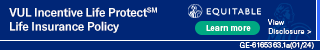
<style>
.page{position:relative;width:320px;height:50px;background:#002677}
.page>*{position:absolute;margin:0}
.t1{font:11.9px/13.9px "GTAmerica-Md";letter-spacing:-0.02em;color:#ffffff}
.t2{font:8.3px "GTAmerica-Md";letter-spacing:0.02em;color:#ffffff}
.t3{font:7.3px "GTAmerica-Th";letter-spacing:0.025em;color:#ffffff}
.t4{font:7.3px "GTAmerica-Lt";letter-spacing:0.025em;color:#ffffff}
</style>
<div class="page">
<p class="t1" style="left:9px;top:7px;width:148px;height:26px">VUL Incentive Life ProtectSM<br>Life Insurance Policy</p>
<p class="t2" style="left:206px;top:25px;width:45px;height:6px">Learn more</p>
<p class="t3" style="left:268px;top:19px;width:44px;height:15px">View<br>Disclosure &gt;</p>
<p class="t4" style="left:239px;top:42px;width:75px;height:7px">GE-6165363.1a(01/24)</p>
</div>
